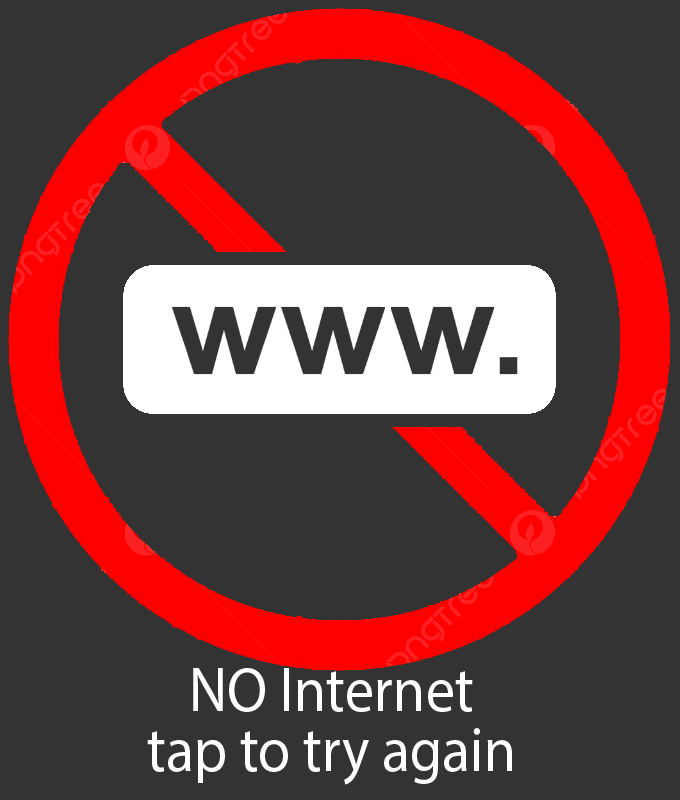
<style>
.page{position:relative;width:680px;height:800px;background:#333333}
.page>*{position:absolute;margin:0}
.t1{font:63px/60px "MyriadPro-Regular";color:#ffffff;scale:0.92 1}
</style>
<div class="page">
<p class="t1" style="left:147px;top:668px;width:365px;height:117px;text-align:center">NO Internet<br>tap to try again</p>
</div>
